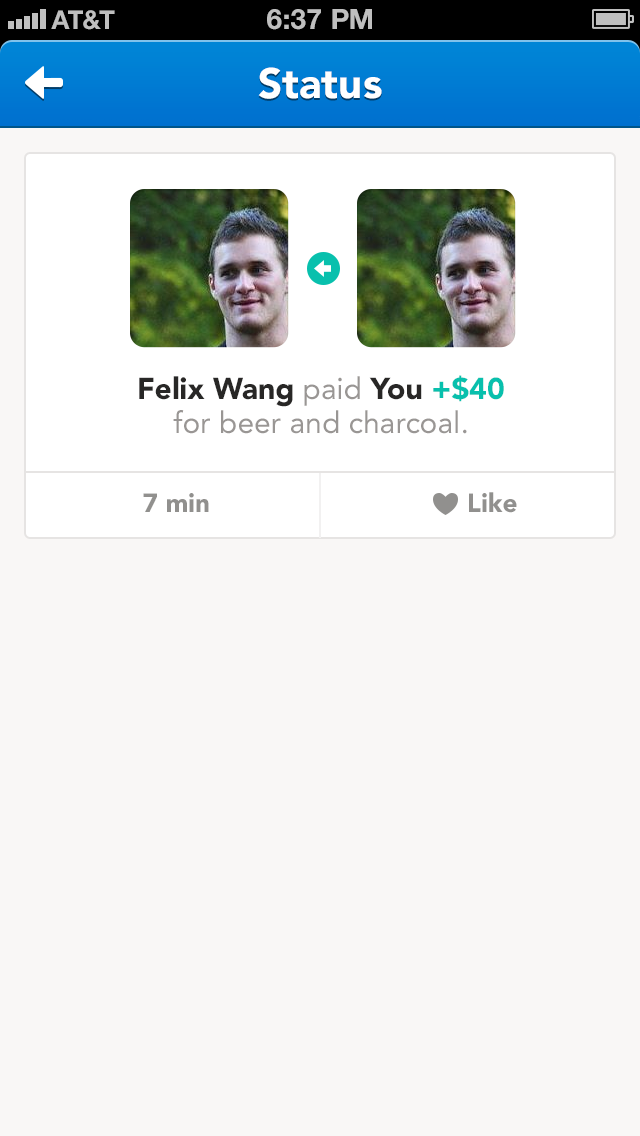
<style>
.page{position:relative;width:640px;height:1136px;background:#f9f7f6}
.page>*{position:absolute;margin:0}
.t1{font:42px "Avenir-Black";color:#ffffff}
.t2{font:30px/34px "Avenir-Roman";color:#999694}
.t3{font:30px/34px "Avenir-Black";color:#282726}
.t4{font:30px/34px "Avenir-Black";color:#08c0ad}
.t5{font:26px "Avenir-Black";color:#91908e}
</style>
<div class="page">
<p class="t1" style="left:258px;top:67px;width:124px;height:32px">Status</p>
<p class="t2" style="left:139px;top:375px;width:365px;height:59px;text-align:center"><span class="t3">Felix Wang </span>paid <span class="t3">You </span><span class="t4">+$40 <br></span>for beer and charcoal.</p>
<p class="t5" style="left:143px;top:493px;width:66px;height:19px">7 min</p>
<p class="t5" style="left:469px;top:492px;width:48px;height:21px">Like</p>
</div>
